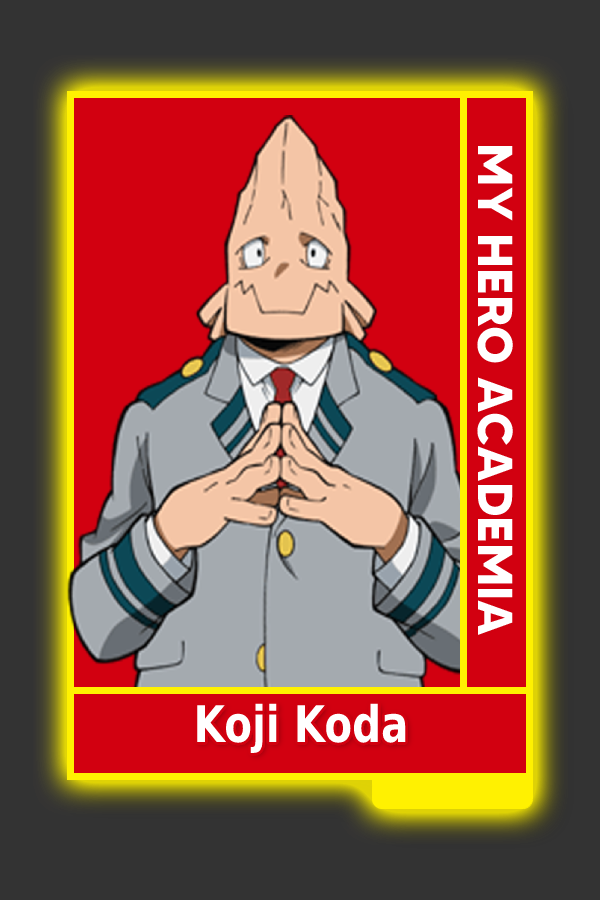
<style>
.page{position:relative;width:600px;height:900px;background:#d20010}
.page>*{position:absolute;margin:0}
.t1{font:48.8px "MADETOMMY-Bold";color:#ffffff}
.t2{font:50.5px "MADETOMMY-Bold";color:#ffffff;scale:0.8 1}
</style>
<div class="page">
<p class="t1" style="left:477px;top:146px;width:36px;height:489px;rotate:90deg">MY HERO ACADEMIA</p>
<p class="t2" style="left:197px;top:703px;width:209px;height:50px">Koji Koda</p>
</div>
